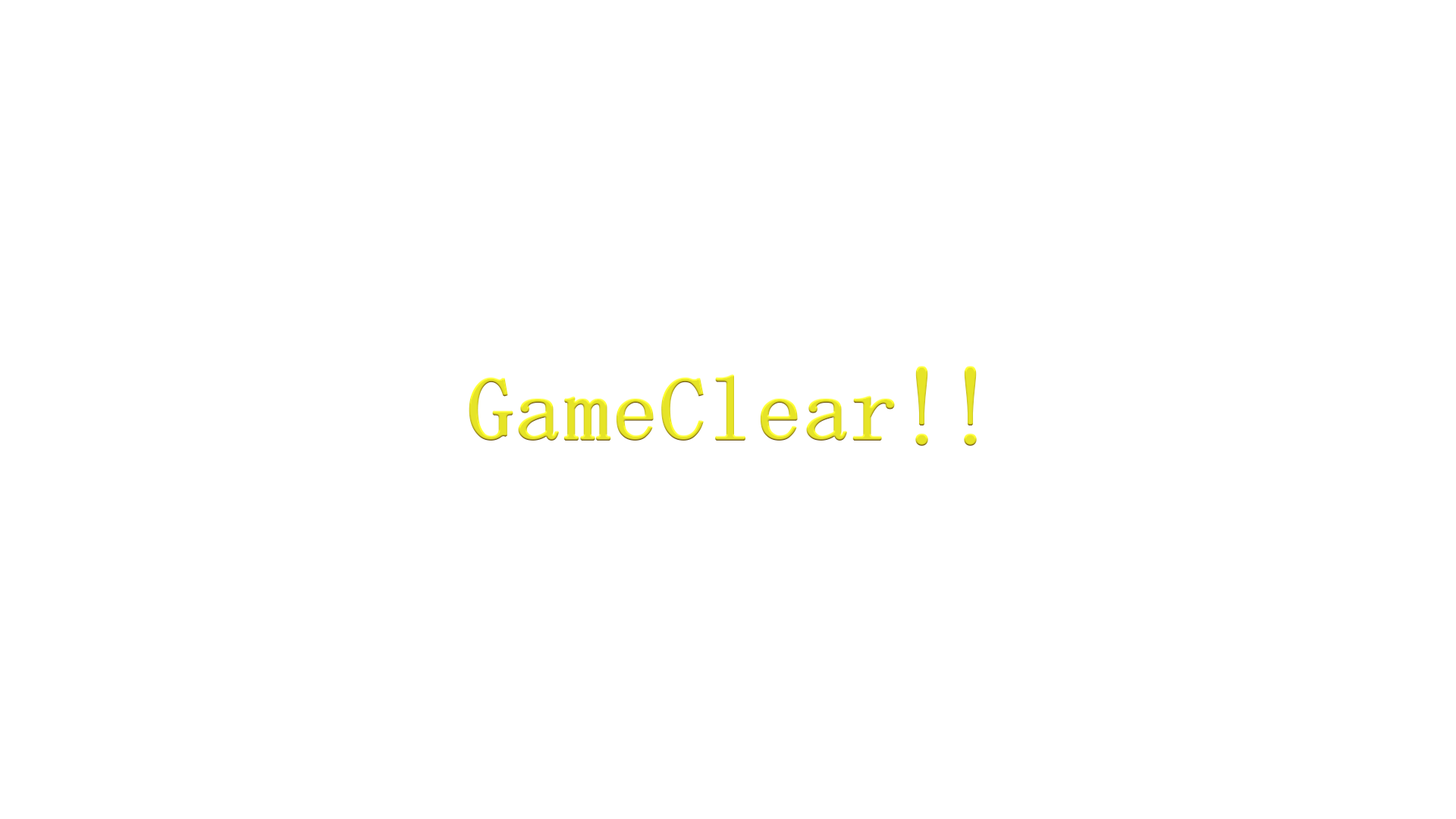
<style>
.page{position:relative;width:1456px;height:819px;background:#ffffff}
.page>*{position:absolute;margin:0}
.t1{font:91px "MS-Mincho";color:#e6e427;font-weight:bold}
</style>
<div class="page">
<p class="t1" style="left:469px;top:366px;width:508px;height:80px">GameClear!!</p>
</div>
